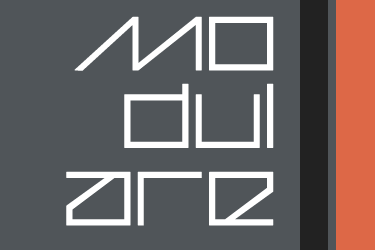
<style>
.page{position:relative;width:375px;height:250px;background:#505559}
.page>*{position:absolute;margin:0}
.t1{font:107.9px/77.5px "Cubos-Regular";color:#ffffff;font-weight:bold}
</style>
<div class="page">
<p class="t1" style="left:66px;top:16px;width:208px;height:210px;text-align:right">Mo<br>dul<br>are</p>
</div>
